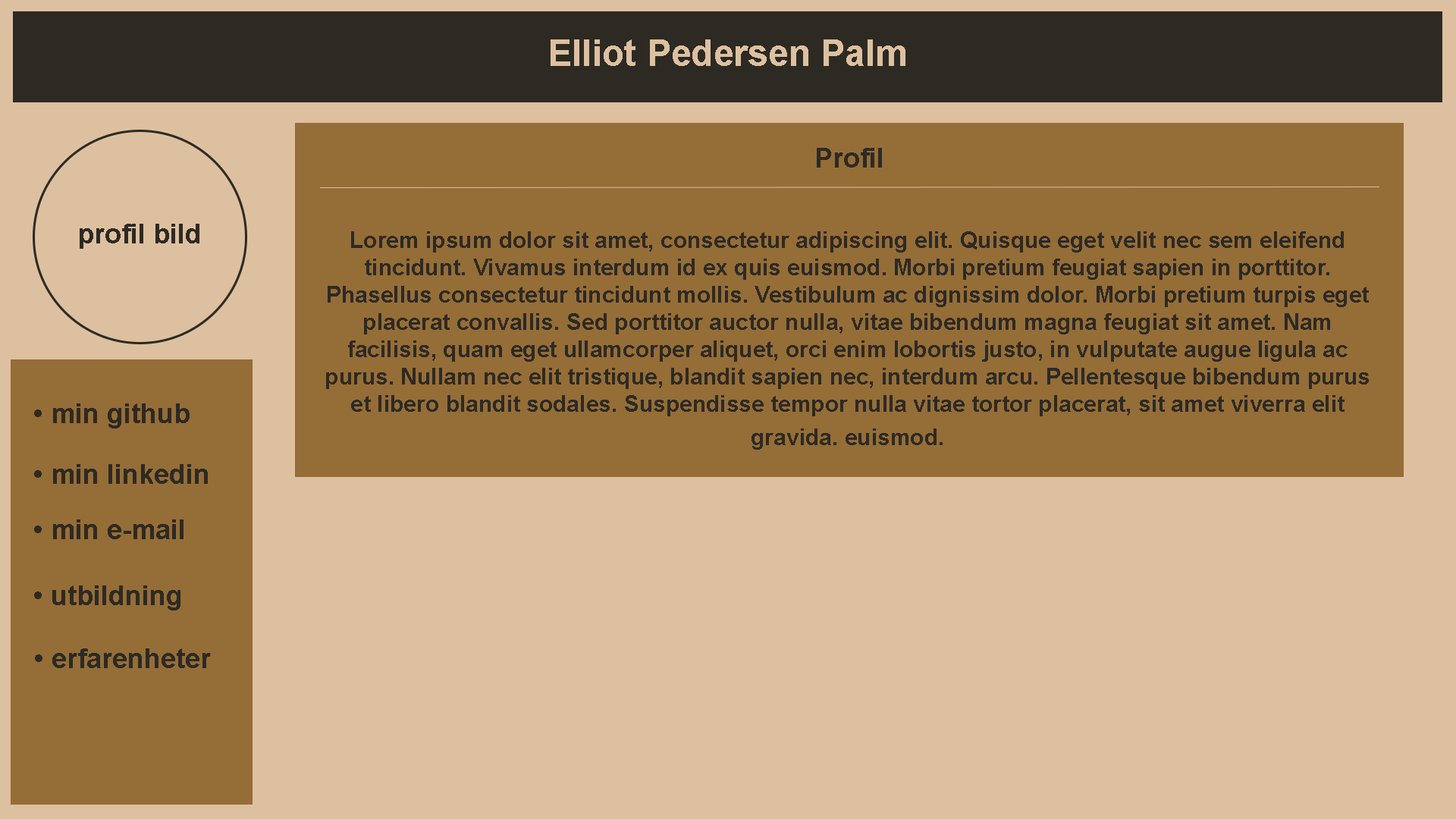
<style>
.page{position:relative;width:1456px;height:819px;background:#ddc09f}
.page>*{position:absolute;margin:0}
.t1{font:36.4px "Arial-BoldMT";color:#ddc09f}
.t2{font:27.3px "Arial-BoldMT";color:#2d2a24}
.t3{font:22.7px "Arial-BoldMT";color:#2d2a24}
</style>
<div class="page">
<p class="t1" style="left:551px;top:39px;width:354px;height:27px">Elliot Pedersen Palm</p>
<p class="t2" style="left:817px;top:148px;width:65px;height:20px">Profil</p>
<p class="t2" style="left:80px;top:224px;width:119px;height:25px">profil bild</p>
<p class="t3" style="left:326px;top:231px;width:1043px;height:219px;text-align:center">Lorem ipsum dolor sit amet, consectetur adipiscing elit. Quisque eget velit nec sem eleifend tincidunt. Vivamus interdum id ex quis euismod. Morbi pretium feugiat sapien in porttitor. Phasellus consectetur tincidunt mollis. Vestibulum ac dignissim dolor. Morbi pretium turpis eget placerat convallis. Sed porttitor auctor nulla, vitae bibendum magna feugiat sit amet. Nam facilisis, quam eget ullamcorper aliquet, orci enim lobortis justo, in vulputate augue ligula ac purus. Nullam nec elit tristique, blandit sapien nec, interdum arcu. Pellentesque bibendum purus et libero blandit sodales. Suspendisse tempor nulla vitae tortor placerat, sit amet viverra elit gravida. euismod.</p>
<p class="t2" style="left:34px;top:403px;width:156px;height:25px">• min github</p>
<p class="t2" style="left:34px;top:464px;width:174px;height:20px">• min linkedin</p>
<p class="t2" style="left:34px;top:519px;width:150px;height:20px">• min e-mail</p>
<p class="t2" style="left:34px;top:585px;width:146px;height:25px">• utbildning</p>
<p class="t2" style="left:35px;top:648px;width:176px;height:20px">• erfarenheter</p>
</div>
